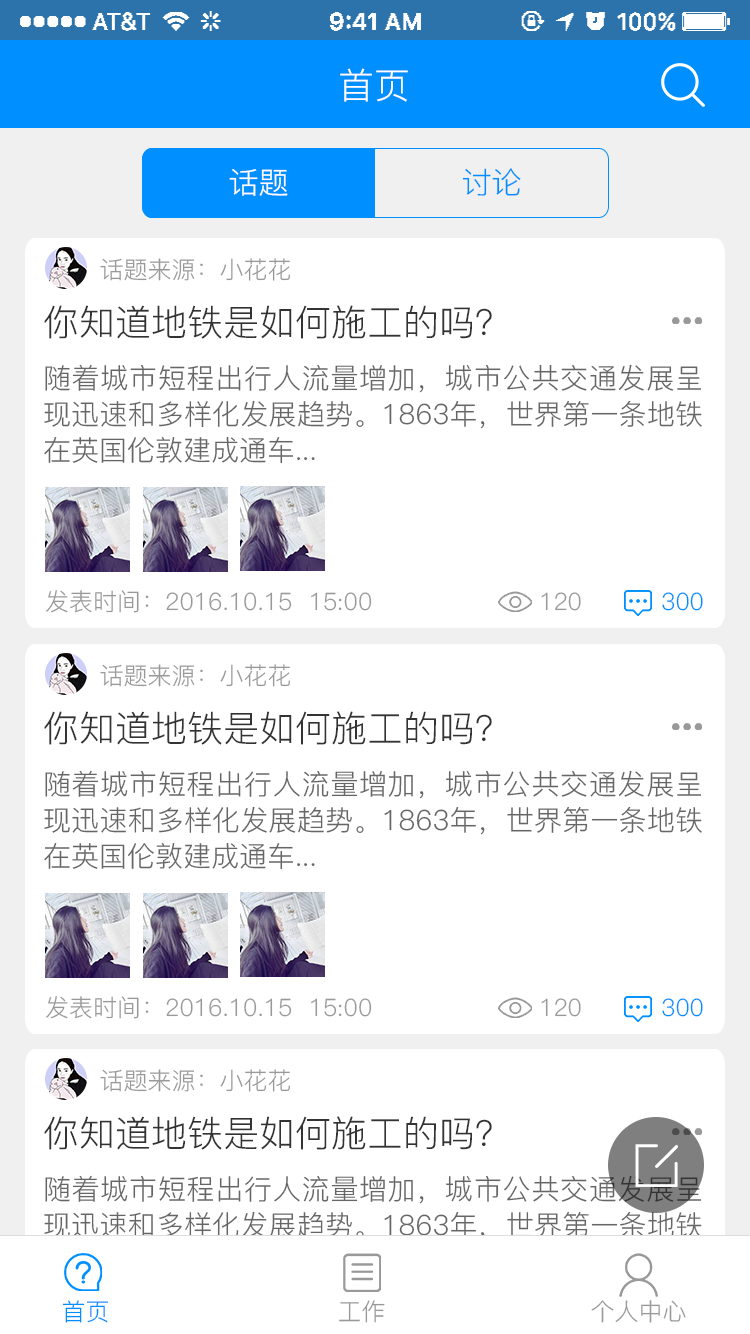
<style>
.page{position:relative;width:750px;height:1334px;background:#ffffff}
.page>*{position:absolute;margin:0}
.t1{font:36px "PingFang-SC-Regular";color:#ffffff}
.t2{font:30px "PingFang-SC-Regular";color:#ffffff}
.t3{font:30px "PingFang-SC-Regular";color:#008fff}
.t4{font:24px "PingFang-SC-Regular";color:#999999}
.t5{font:36px "PingFang-SC-Regular";color:#333333}
.t6{font:28px/36px "PingFang-SC-Regular";color:#666666}
.t7{font:24px "PingFang-SC-Regular";color:#008fff}
</style>
<div class="page">
<p class="t1" style="left:340px;top:68px;width:68px;height:34px">首页</p>
<p class="t2" style="left:229px;top:169px;width:59px;height:27px">话题</p>
<p class="t3" style="left:462px;top:168px;width:59px;height:28px">讨论</p>
<p class="t4" style="left:100px;top:258px;width:191px;height:23px">话题来源：小花花</p>
<p class="t5" style="left:44px;top:305px;width:448px;height:34px">你知道地铁是如何施工的吗？</p>
<p class="t6" style="left:44px;top:364px;width:658px;height:100px;text-align:justify">随着城市短程出行人流量增加，城市公共交通发展呈现迅速和多样化发展趋势。1863年，世界第一条地铁在英国伦敦建成通车...</p>
<p class="t4" style="left:46px;top:590px;width:326px;height:23px">发表时间：2016.10.15  15:00</p>
<p class="t4" style="left:541px;top:592px;width:40px;height:19px">120</p>
<p class="t7" style="left:662px;top:592px;width:41px;height:19px">300</p>
<p class="t4" style="left:100px;top:664px;width:191px;height:23px">话题来源：小花花</p>
<p class="t5" style="left:44px;top:711px;width:448px;height:34px">你知道地铁是如何施工的吗？</p>
<p class="t6" style="left:44px;top:770px;width:658px;height:100px;text-align:justify">随着城市短程出行人流量增加，城市公共交通发展呈现迅速和多样化发展趋势。1863年，世界第一条地铁在英国伦敦建成通车...</p>
<p class="t4" style="left:46px;top:996px;width:326px;height:23px">发表时间：2016.10.15  15:00</p>
<p class="t4" style="left:541px;top:998px;width:40px;height:19px">120</p>
<p class="t7" style="left:662px;top:998px;width:41px;height:19px">300</p>
<p class="t4" style="left:100px;top:1069px;width:191px;height:23px">话题来源：小花花</p>
<p class="t5" style="left:44px;top:1116px;width:448px;height:34px">你知道地铁是如何施工的吗？</p>
<p class="t6" style="left:44px;top:1175px;width:658px;height:100px;text-align:justify">随着城市短程出行人流量增加，城市公共交通发展呈现迅速和多样化发展趋势。1863年，世界第一条地铁在英国伦敦建成通车...</p>
<p class="t7" style="left:62px;top:1300px;width:46px;height:23px">首页</p>
<p class="t4" style="left:339px;top:1300px;width:46px;height:23px">工作</p>
<p class="t4" style="left:591px;top:1300px;width:95px;height:23px">个人中心</p>
</div>
